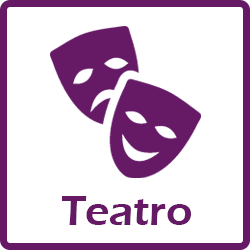
<style>
.page{position:relative;width:250px;height:250px;background:#ffffff}
.page>*{position:absolute;margin:0}
.t1{font:43.1px "ErasITC-Demi";color:#661a66}
</style>
<div class="page">
<p class="t1" style="left:61px;top:196px;width:130px;height:29px">Teatro</p>
</div>
